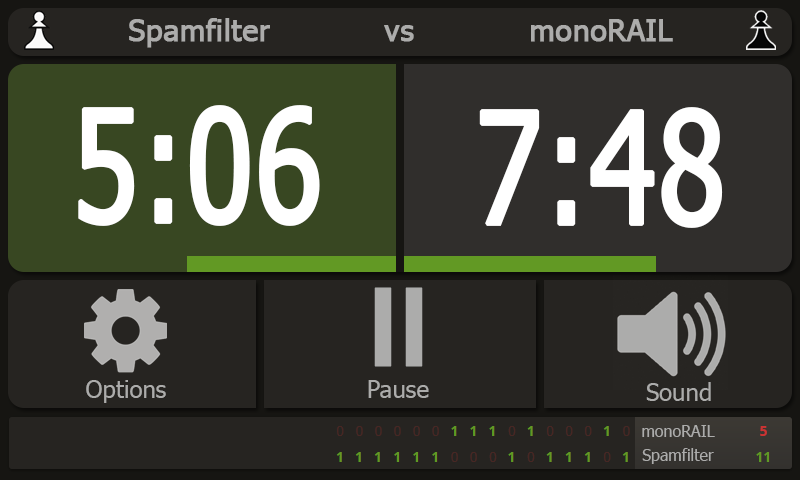
<style>
.page{position:relative;width:800px;height:480px;background:#262421}
.page>*{position:absolute;margin:0}
.t1{font:30px "Tahoma";color:#acacab;font-weight:bold}
.t2{font:156px "Tahoma";color:#ffffff;font-weight:bold;scale:0.77 1}
.t3{font:24px "Tahoma";color:#acacab}
.t4{font:16px/24px "Tahoma";color:#acacab}
</style>
<div class="page">
<p class="t1" style="left:129px;top:18px;width:141px;height:30px">Spamfilter</p>
<p class="t1" style="left:384px;top:25px;width:30px;height:17px">vs</p>
<p class="t1" style="left:531px;top:19px;width:142px;height:23px">monoRAIL</p>
<p class="t2" style="left:78px;top:105px;width:242px;height:121px">5:06</p>
<p class="t2" style="left:479px;top:107px;width:244px;height:121px">7:48</p>
<p class="t3" style="left:86px;top:380px;width:80px;height:23px">Options</p>
<p class="t3" style="left:368px;top:380px;width:61px;height:18px">Pause</p>
<p class="t3" style="left:646px;top:382px;width:65px;height:19px">Sound</p>
<p class="t4" style="left:642px;top:425px;width:73px;height:39px;text-align:center">monoRAIL<br>Spamfilter</p>
</div>
